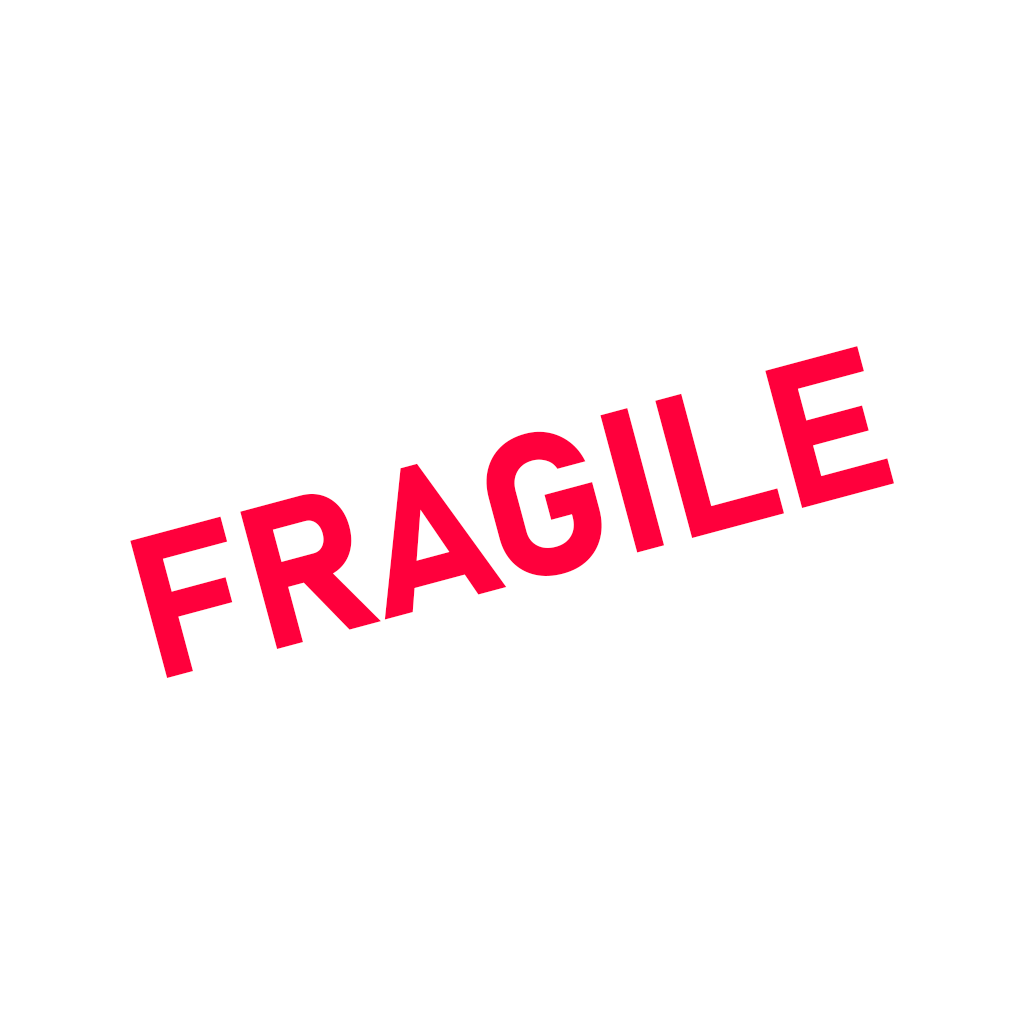
<style>
.page{position:relative;width:1024px;height:1024px;background:#ffffff}
.page>*{position:absolute;margin:0}
.t1{font:200px "Bahnschrift-Bold";color:#ff003c;text-transform:uppercase}
</style>
<div class="page">
<p class="t1" style="left:130px;top:346px;width:764px;height:332px;rotate:-15deg">Fragile</p>
</div>
